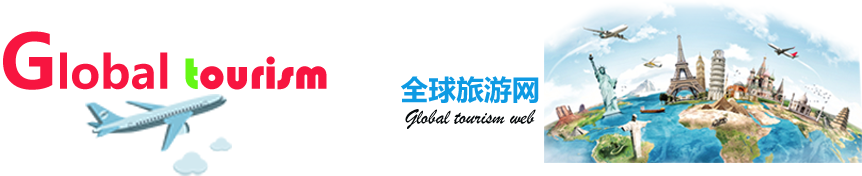
<style>
.page{position:relative;width:862px;height:176px;background:#ffffff}
.page>*{position:absolute;margin:0}
.t1{font:45.6px "Bauhaus93";color:#f71540}
.t2{font:74.1px "MicrosoftYaHei-Bold";color:#f71540}
.t3{font:45.6px "MicrosoftYaHei-Bold";color:#f71540}
.t4{font:45.6px "Bauhaus93";color:#65f715}
.t5{font:27.9px "MicrosoftYaHei-Bold";color:#0e9ae3}
.t6{font:21.6px "STXingkai";color:#05090b}
</style>
<div class="page">
<p class="t1" style="left:3px;top:31px;width:324px;height:59px"><span class="t2">G</span><span class="t3">lobal </span><span class="t4">t</span>ourism</p>
<p class="t5" style="left:401px;top:76px;width:138px;height:28px">全球旅游网</p>
<p class="t6" style="left:405px;top:109px;width:131px;height:20px">Global tourism web</p>
</div>
